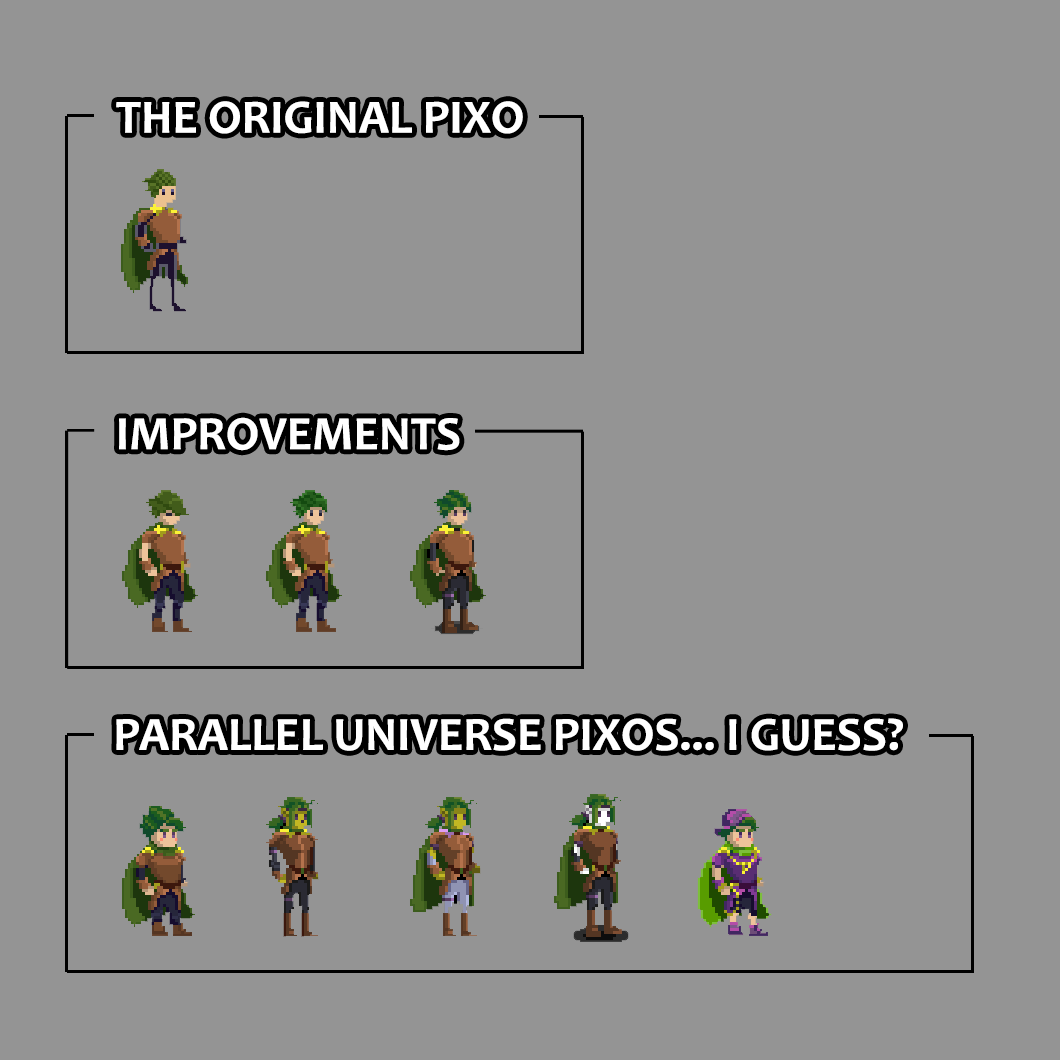
<style>
.page{position:relative;width:1060px;height:1060px;background:#949494}
.page>*{position:absolute;margin:0}
.t1{font:48px "Candara-Bold";color:#ffffff}
.t2{font:48.1px "Candara-Bold";color:#ffffff}
</style>
<div class="page">
<p class="t1" style="left:116px;top:101px;width:407px;height:33px">THE ORIGINAL PIXO</p>
<p class="t2" style="left:119px;top:417px;width:341px;height:34px">IMPROVEMENTS</p>
<p class="t1" style="left:116px;top:718px;width:787px;height:33px">PARALLEL UNIVERSE PIXOS... I GUESS?</p>
</div>
